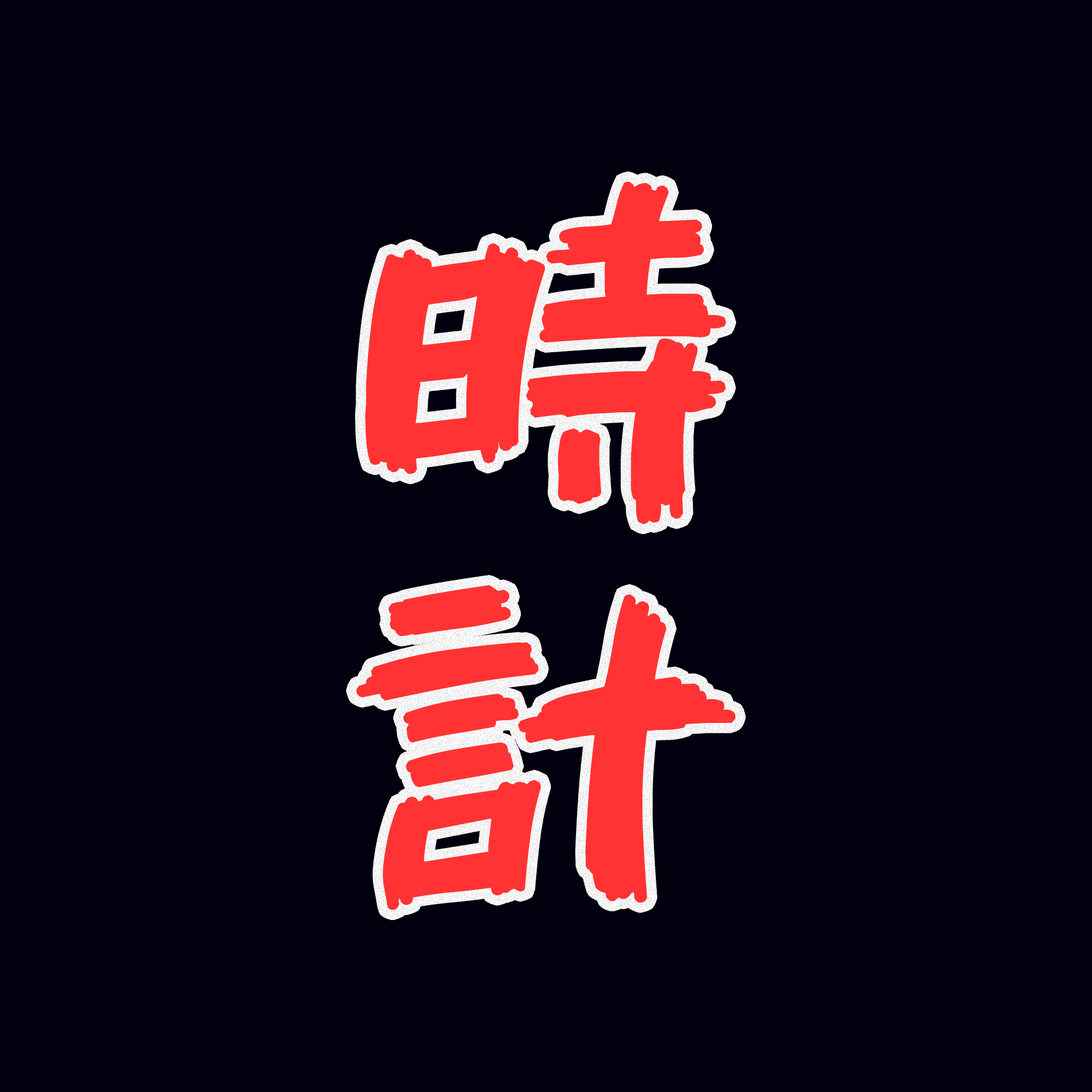
<style>
.page{position:relative;width:1092px;height:1092px;background:#00000e}
.page>*{position:absolute;margin:0}
.t1{font:394.7px/394.7px "851CHIKARA-DZUYOKU";color:#ff3333}
</style>
<div class="page">
<p class="t1" style="left:356px;top:181px;width:380px;height:729px">時<br>計</p>
</div>
